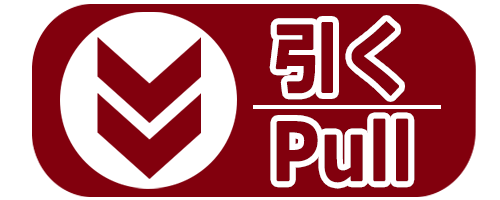
<style>
.page{position:relative;width:500px;height:200px;background:#82000d}
.page>*{position:absolute;margin:0}
.t1{font:78.4px/92px "Meiryo-Bold";color:#82000d;font-weight:bold;scale:0.87 1}
</style>
<div class="page">
<p class="t1" style="left:275px;top:21px;width:134px;height:162px;text-align:center">引く<br>Pull</p>
</div>
